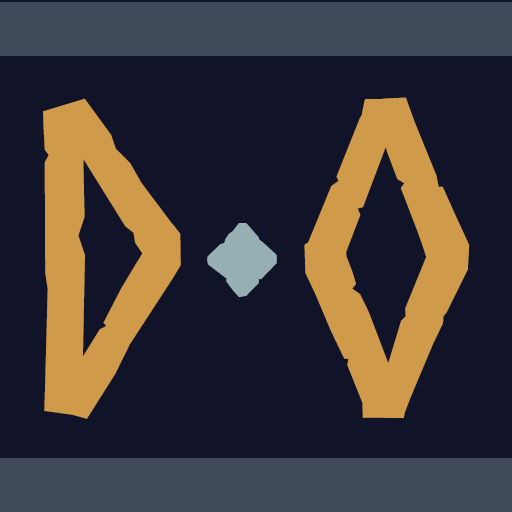
<style>
.page{position:relative;width:512px;height:512px;background:#111328}
.page>*{position:absolute;margin:0}
.t1{font:418.3px "Norse-Bold";color:#cf9a4a;font-weight:bold}
.t2{font:430.8px "Norse-Bold";color:#cf9a4a;font-weight:bold}
.t3{font:232px "Norse-Bold";color:#96afb3;font-weight:bold}
</style>
<div class="page">
<p class="t1" style="left:43px;top:98px;width:138px;height:321px">D</p>
<p class="t2" style="left:304px;top:97px;width:166px;height:321px">O</p>
<p class="t3" style="left:207px;top:223px;width:70px;height:75px">•</p>
</div>
